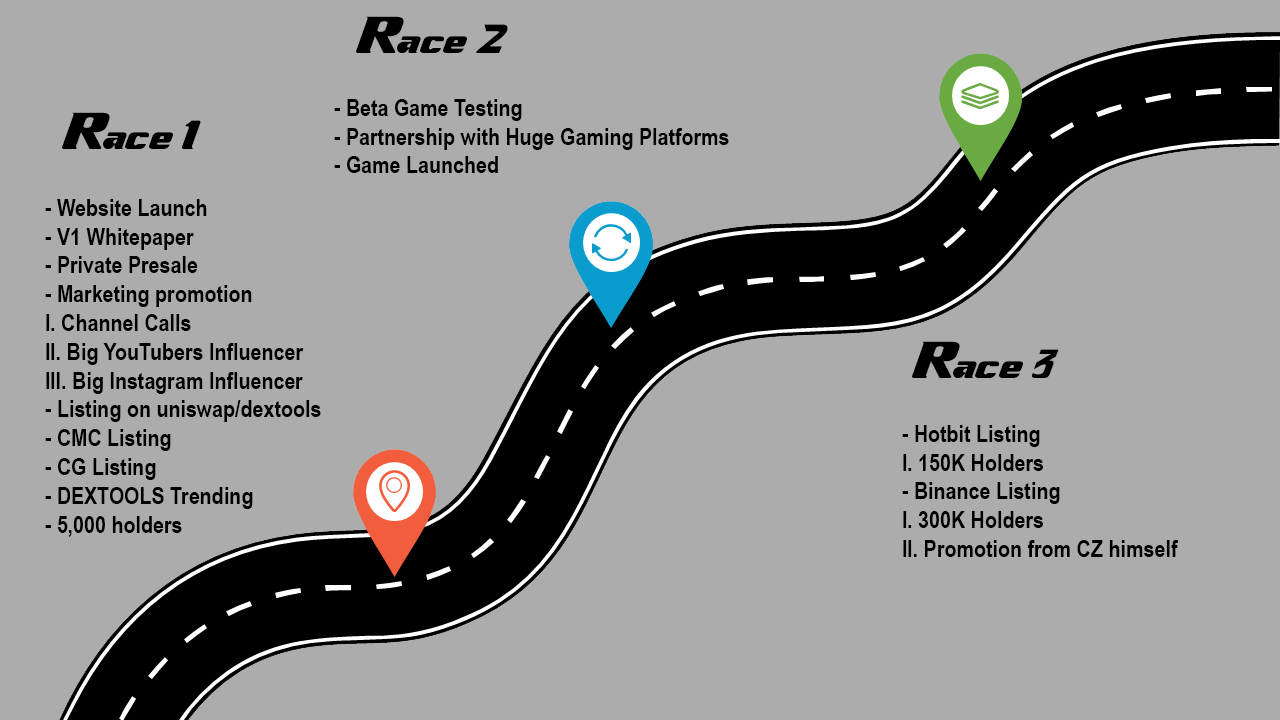
<style>
.page{position:relative;width:1280px;height:720px;background:#acacac}
.page>*{position:absolute;margin:0}
.t1{font:40px "-Xenogears";color:#000000}
.t2{font:24px "ArialNarrow-Bold";color:#000000}
</style>
<div class="page">
<p class="t1" style="left:356px;top:16px;width:152px;height:37px">Race 2</p>
<p class="t2" style="left:334px;top:99px;width:395px;height:74px">- Beta Game Testing<br>- Partnership with Huge Gaming Platforms<br>- Game Launched</p>
<p class="t1" style="left:62px;top:112px;width:139px;height:37px">Race 1</p>
<p class="t2" style="left:45px;top:199px;width:276px;height:338px">- Website Launch<br>- V1 Whitepaper<br>- Private Presale<br>- Marketing promotion<br>I. Channel Calls<br>Il. Big YouTubers Influencer<br>lll. Big Instagram Influencer<br>- Listing on uniswap/dextools<br>- CMC Listing<br>- CG Listing<br>- DEXTOOLS Trending<br>- 5,000 holders</p>
<p class="t1" style="left:912px;top:341px;width:147px;height:37px">Race 3</p>
<p class="t2" style="left:902px;top:425px;width:277px;height:132px">- Hotbit Listing<br>I. 150K Holders<br>- Binance Listing<br>I. 300K Holders<br>Il. Promotion from CZ himself</p>
</div>
